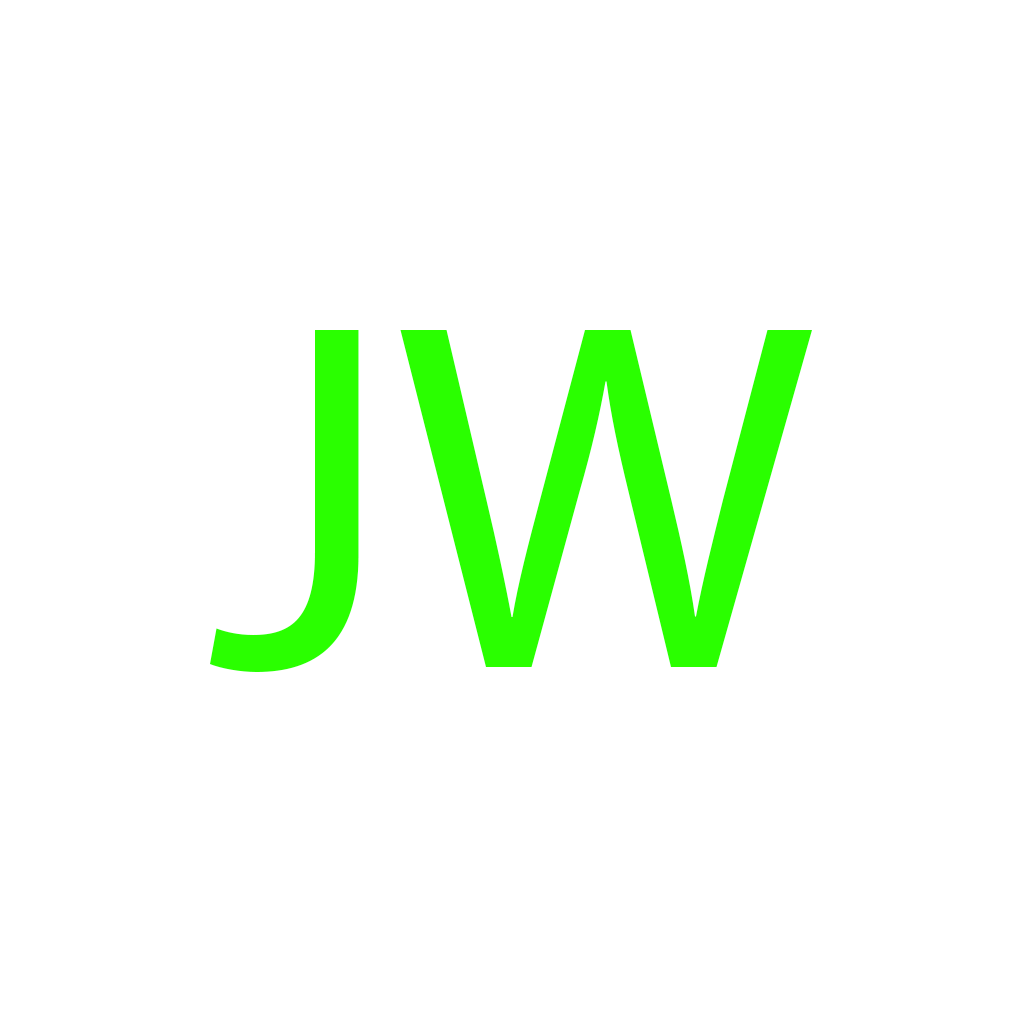
<style>
.page{position:relative;width:1024px;height:1024px;background:#ffffff}
.page>*{position:absolute;margin:0}
.t1{font:500px "MyriadPro-Regular";color:#2aff00}
</style>
<div class="page">
<p class="t1" style="left:210px;top:330px;width:602px;height:342px">JW</p>
</div>
